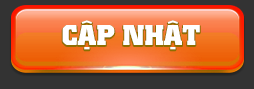
<style>
.page{position:relative;width:254px;height:89px;background:#333333}
.page>*{position:absolute;margin:0}
.t1{font:28.4px "UTM-Colossalis";color:#ffffff}
</style>
<div class="page">
<p class="t1" style="left:62px;top:20px;width:138px;height:30px">CẬP NHẬT</p>
</div>
